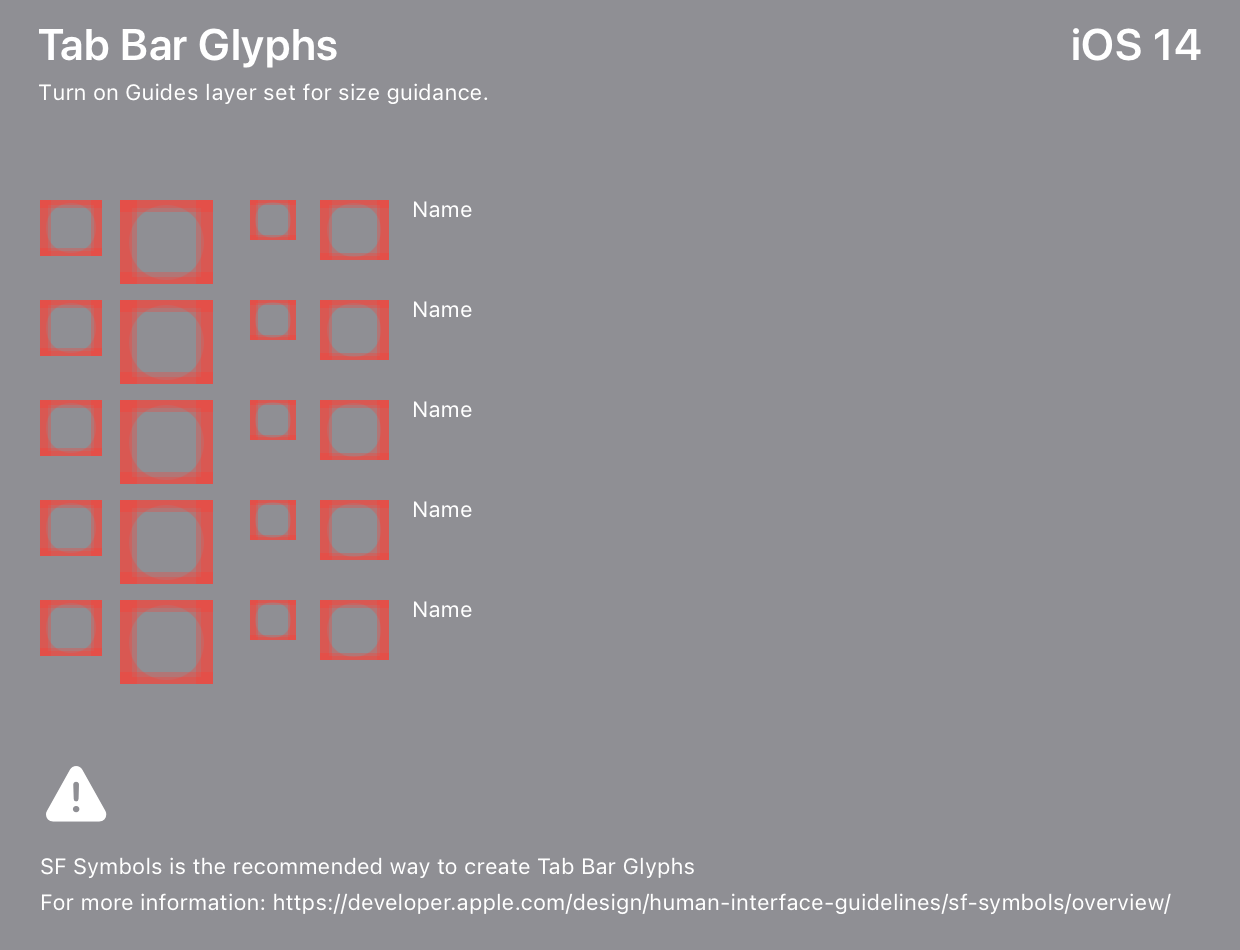
<style>
.page{position:relative;width:1240px;height:950px;background:#8f8f94}
.page>*{position:absolute;margin:0}
.t1{font:44px "SFProDisplay-Semibold";letter-spacing:0.016em;color:#ffffff}
.t2{font:22px "SFProText-Regular";letter-spacing:0.006em;color:#ffffff}
.t3{font:22px/100px "SFProText-Regular";letter-spacing:0.006em;color:#ffffff}
.t4{font:22px/36px "SFProText-Regular";letter-spacing:0.006em;color:#ffffff}
</style>
<div class="page">
<p class="t1" style="left:39px;top:28px;width:298px;height:40px">Tab Bar Glyphs</p>
<p class="t1" style="left:1073px;top:28px;width:128px;height:33px">iOS 14</p>
<p class="t2" style="left:39px;top:83px;width:449px;height:21px">Turn on Guides layer set for size guidance.</p>
<p class="t3" style="left:414px;top:201px;width:58px;height:417px">Name<br>Name<br>Name<br>Name<br>Name</p>
<p class="t4" style="left:41px;top:857px;width:1130px;height:58px">SF Symbols is the recommended way to create Tab Bar Glyphs<br>For more information: https://developer.apple.com/design/human-interface-guidelines/sf-symbols/overview/</p>
</div>
